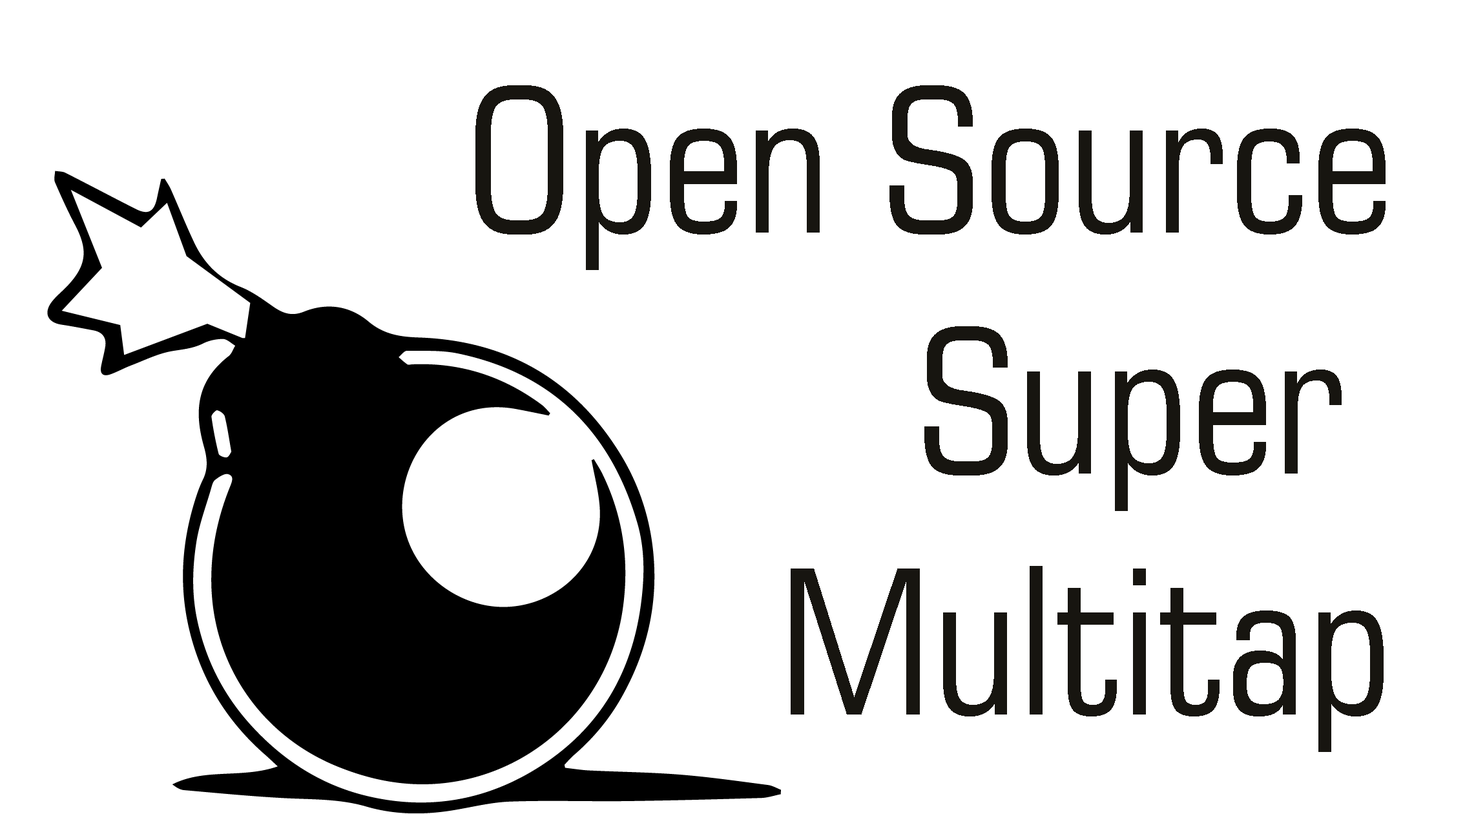
<style>
.page{position:relative;width:1465px;height:814px;background:#ffffff}
.page>*{position:absolute;margin:0}
.t1{font:201px "Square721BT-RomanCondensed";color:#171510}
</style>
<div class="page">
<p class="t1" style="left:475px;top:85px;width:911px;height:667px;text-align:right">Open Source<br>Super <br>Multitap</p>
</div>
